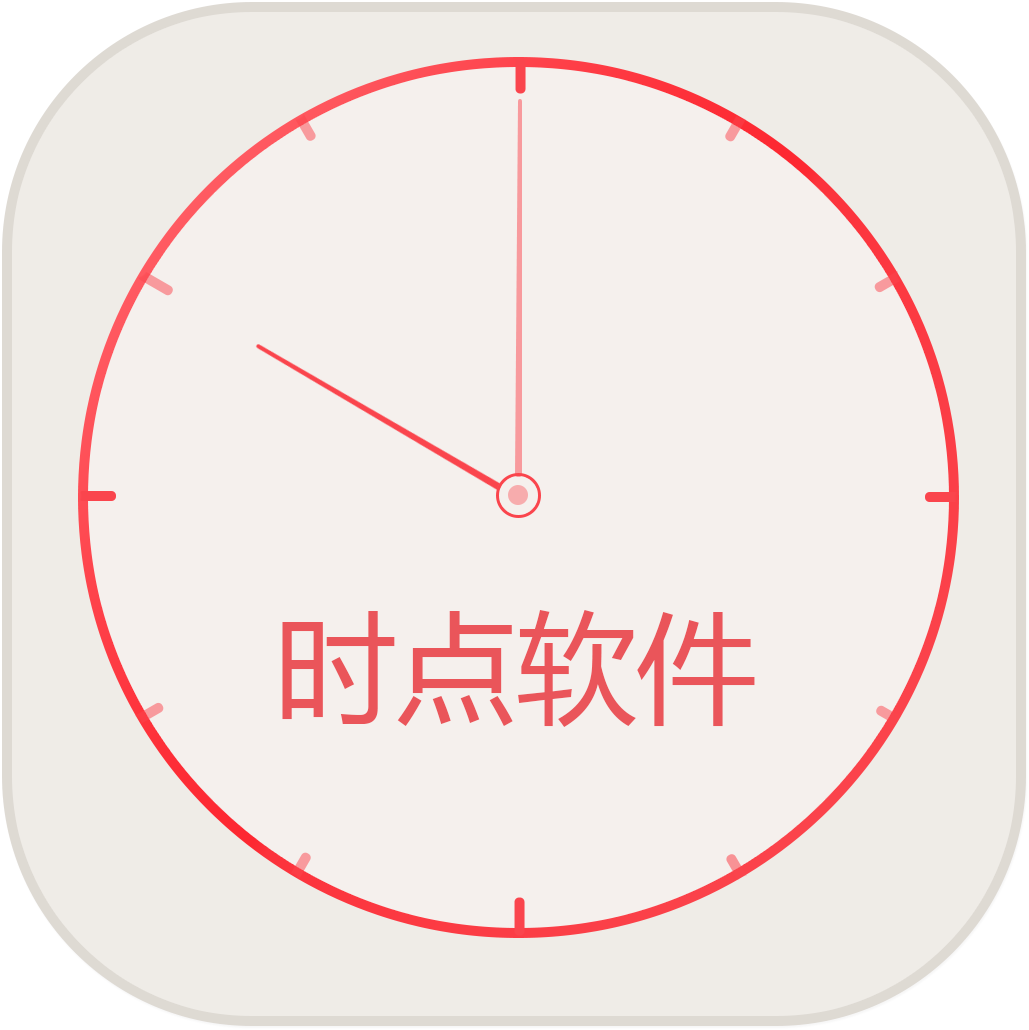
<style>
.page{position:relative;width:1029px;height:1030px;background:#f5f0ed}
.page>*{position:absolute;margin:0}
.t1{font:120px "MicrosoftYaHei";color:#ea555a;text-transform:uppercase}
</style>
<div class="page">
<p class="t1" style="left:282px;top:610px;width:473px;height:117px">时点软件</p>
</div>
